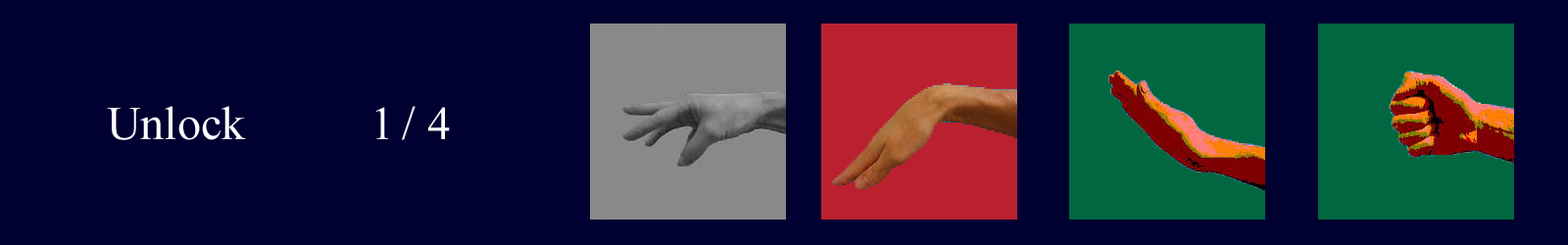
<style>
.page{position:relative;width:1568px;height:245px;background:#000031}
.page>*{position:absolute;margin:0}
.t1{font:47px "TimesNewRomanPSMT";color:#ffffff}
</style>
<div class="page">
<p class="t1" style="left:107px;top:106px;width:343px;height:34px">Unlock           1 / 4</p>
</div>
